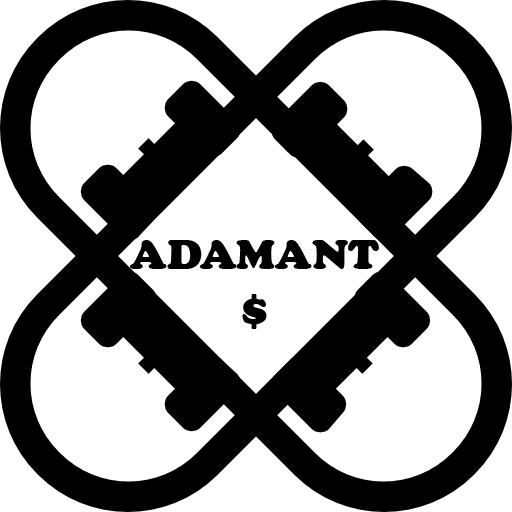
<style>
.page{position:relative;width:512px;height:512px;background:#ffffff}
.page>*{position:absolute;margin:0}
.t1{font:43.9px "CooperBlack";color:#000000}
.t2{font:45.1px "CooperBlack";color:#000000}
</style>
<div class="page">
<p class="t1" style="left:130px;top:240px;width:249px;height:89px;text-align:center">ADAMANT<br><span class="t2">$</span></p>
</div>
